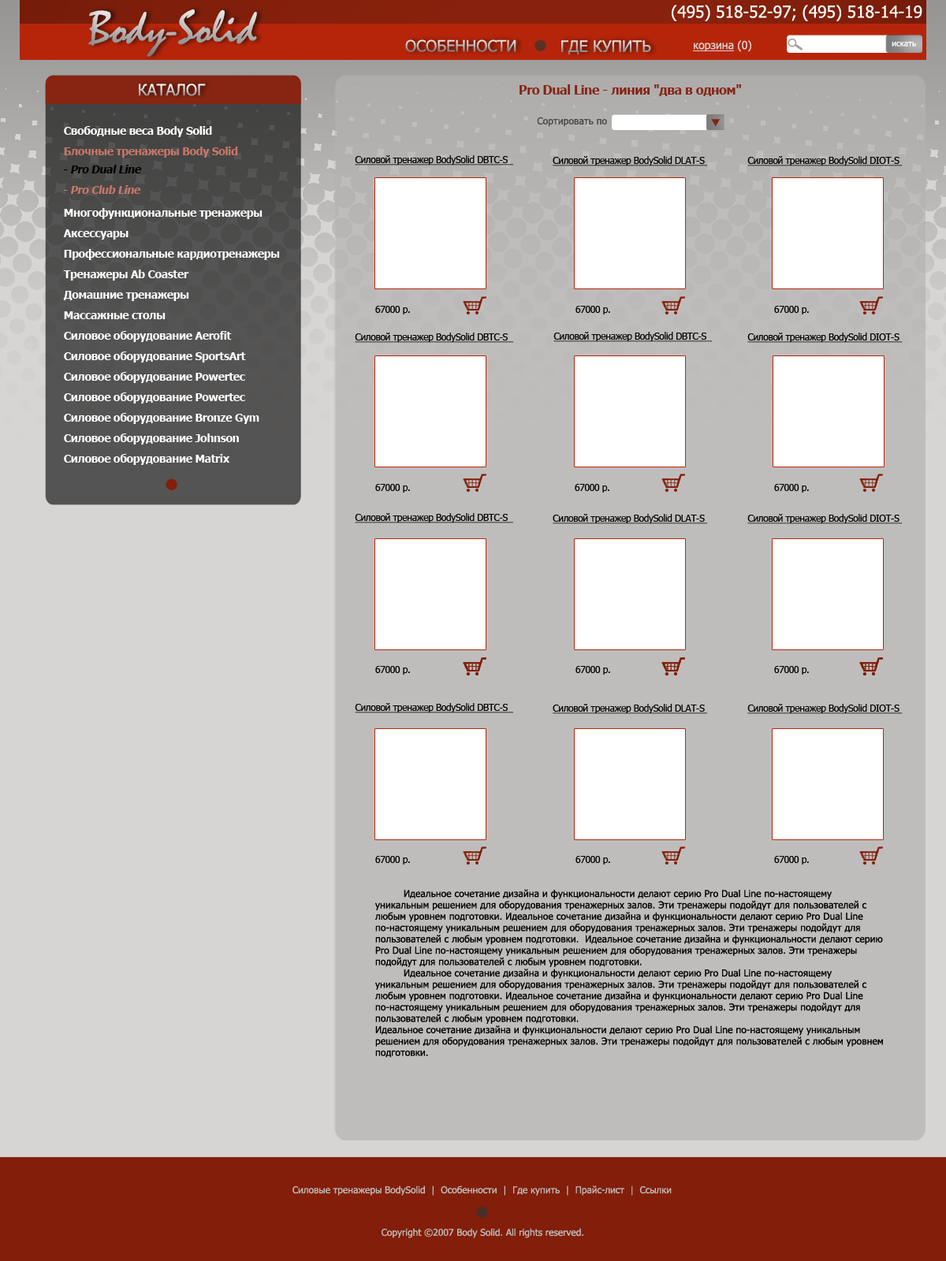
<style>
.page{position:relative;width:946px;height:1261px;background:#bfbdbc}
.page>*{position:absolute;margin:0}
.t1{font:16.5px "Tahoma";color:#ffffff}
.t2{font:47.3px "Mistral"}
.t3{font:15.8px "Tahoma"}
.t4{font:11px "Tahoma";color:#d7d5d3;text-decoration:underline}
.t5{font:11px "Tahoma";color:#d7d5d3}
.t6{font:7.9px "Tahoma";letter-spacing:0.01em;color:#ffffff}
.t7{font:12.6px "Tahoma-Bold";letter-spacing:-0.025em;color:#872412}
.t8{font:9.5px "Tahoma";letter-spacing:0.01em;color:#474747}
.t9{font:11px/20.5px "Tahoma-Bold";letter-spacing:-0.025em;color:#ffffff}
.t10{font:11px/20.5px "Tahoma-Bold";letter-spacing:-0.025em;color:#ca7869}
.t11{font:9.5px "Tahoma";letter-spacing:-0.025em;color:#000000;text-decoration:underline}
.t12{font:9.5px "Tahoma";letter-spacing:-0.025em;color:#000000}
.t13{font:9.5px "Tahoma";letter-spacing:0.01em;color:#000000}
.t14{font:9.5px "Tahoma";color:#bfbdbc}
</style>
<div class="page">
<p class="t1" style="left:671px;top:5px;width:251px;height:16px">(495) 518-52-97; (495) 518-14-19</p>
<p class="t2" style="left:88px;top:9px;width:169px;height:48px">Body-Solid</p>
<p class="t3" style="left:405px;top:39px;width:111px;height:13px">ОСОБЕННОСТИ</p>
<p class="t3" style="left:561px;top:40px;width:90px;height:15px">ГДЕ КУПИТЬ</p>
<p class="t4" style="left:693px;top:40px;width:58px;height:12px">корзина<span class="t5"> (0)</span></p>
<p class="t6" style="left:891px;top:42px;width:25px;height:4px">искать</p>
<p class="t3" style="left:139px;top:84px;width:67px;height:12px">КАТАЛОГ</p>
<p class="t7" style="left:519px;top:84px;width:222px;height:12px">Pro Dual Line - линия "два в одном"</p>
<p class="t8" style="left:537px;top:117px;width:70px;height:10px">Сортировать по</p>
<p class="t9" style="left:63px;top:126px;width:217px;height:339px">Свободные веса Body Solid<br><span class="t10">Блочные тренажеры Body Solid<br><br>    <br></span>Многофункциональные тренажеры<br>Аксессуары<br>Профессиональные кардиотренажеры<br>Тренажеры Ab Coaster<br>Домашние тренажеры<br>Массажные столы<br>Силовое оборудование Aerofit <br>Силовое оборудование SportsArt<br>Силовое оборудование Powertec<br>Силовое оборудование Powertec<br>Силовое оборудование Bronze Gym<br>Cиловое оборудование Johnson<br>Силовое оборудование Matrix</p>
<p class="t11" style="left:355px;top:155px;width:158px;height:10px">Силовой тренажер BodySolid DBTC-S</p>
<p class="t11" style="left:552px;top:156px;width:155px;height:10px">Силовой тренажер BodySolid DLAT-S</p>
<p class="t11" style="left:747px;top:156px;width:155px;height:10px">Силовой тренажер BodySolid DIOT-S</p>
<p class="t12" style="left:375px;top:306px;width:35px;height:8px">67000 р.</p>
<p class="t12" style="left:575px;top:306px;width:35px;height:8px">67000 р.</p>
<p class="t12" style="left:774px;top:306px;width:35px;height:8px">67000 р.</p>
<p class="t11" style="left:355px;top:333px;width:158px;height:10px">Силовой тренажер BodySolid DBTC-S</p>
<p class="t11" style="left:553px;top:332px;width:159px;height:10px">Силовой тренажер BodySolid DBTC-S</p>
<p class="t11" style="left:747px;top:333px;width:155px;height:10px">Силовой тренажер BodySolid DIOT-S</p>
<p class="t12" style="left:375px;top:484px;width:35px;height:9px">67000 р.</p>
<p class="t12" style="left:575px;top:484px;width:34px;height:9px">67000 р.</p>
<p class="t12" style="left:774px;top:484px;width:35px;height:9px">67000 р.</p>
<p class="t13" style="left:375px;top:889px;width:508px;height:169px">Идеальное сочетание дизайна и функциональности делают серию Pro Dual Line по-настоящему уникальным решением для оборудования тренажерных залов. Эти тренажеры подойдут для пользователей с любым уровнем подготовки. Идеальное сочетание дизайна и функциональности делают серию Pro Dual Line по-настоящему уникальным решением для оборудования тренажерных залов. Эти тренажеры подойдут для пользователей с любым уровнем подготовки.  Идеальное сочетание дизайна и функциональности делают серию Pro Dual Line по-настоящему уникальным решением для оборудования тренажерных залов. Эти тренажеры подойдут для пользователей с любым уровнем подготовки. <br> Идеальное сочетание дизайна и функциональности делают серию Pro Dual Line по-настоящему уникальным решением для оборудования тренажерных залов. Эти тренажеры подойдут для пользователей с любым уровнем подготовки. Идеальное сочетание дизайна и функциональности делают серию Pro Dual Line по-настоящему уникальным решением для оборудования тренажерных залов. Эти тренажеры подойдут для пользователей с любым уровнем подготовки.<br>Идеальное сочетание дизайна и функциональности делают серию Pro Dual Line по-настоящему уникальным решением для оборудования тренажерных залов. Эти тренажеры подойдут для пользователей с любым уровнем подготовки.</p>
<p class="t14" style="left:292px;top:1185px;width:379px;height:11px">Силовые тренажеры BodySolid  |  Особенности  |  Где купить  |  Прайс-лист  |  Ссылки</p>
<p class="t14" style="left:381px;top:1228px;width:202px;height:10px">Copyright ©2007 Body Solid. All rights reserved.</p>
</div>
